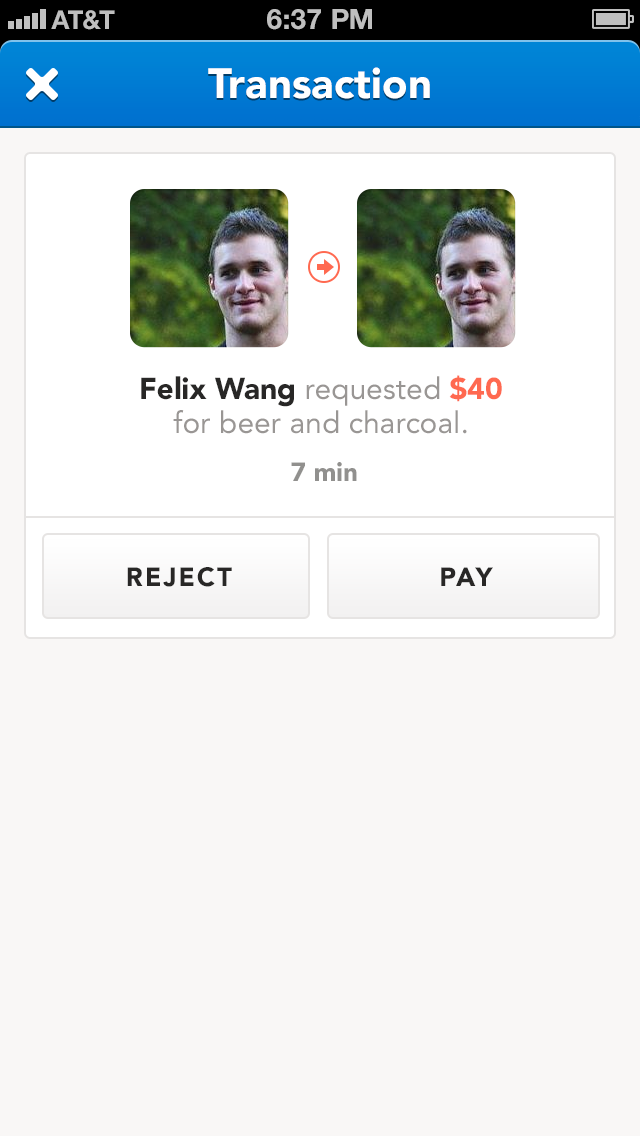
<style>
.page{position:relative;width:640px;height:1136px;background:#f9f7f6}
.page>*{position:absolute;margin:0}
.t1{font:42px "Avenir-Black";color:#ffffff}
.t2{font:30px/34px "Avenir-Roman";color:#999694}
.t3{font:30px/34px "Avenir-Black";color:#282726}
.t4{font:30px/34px "Avenir-Black";color:#ff6950}
.t5{font:26px "Avenir-Black";color:#91908e}
.t6{font:26px "Avenir-Black";letter-spacing:0.08em;color:#282726;text-transform:uppercase}
</style>
<div class="page">
<p class="t1" style="left:208px;top:67px;width:222px;height:32px">Transaction</p>
<p class="t2" style="left:141px;top:375px;width:361px;height:59px;text-align:center"><span class="t3">Felix Wang </span>requested <span class="t4">$40 <br></span>for beer and charcoal.</p>
<p class="t5" style="left:291px;top:462px;width:66px;height:19px">7 min</p>
<p class="t6" style="left:127px;top:567px;width:105px;height:20px">Reject</p>
<p class="t6" style="left:441px;top:567px;width:52px;height:19px">Pay</p>
</div>
